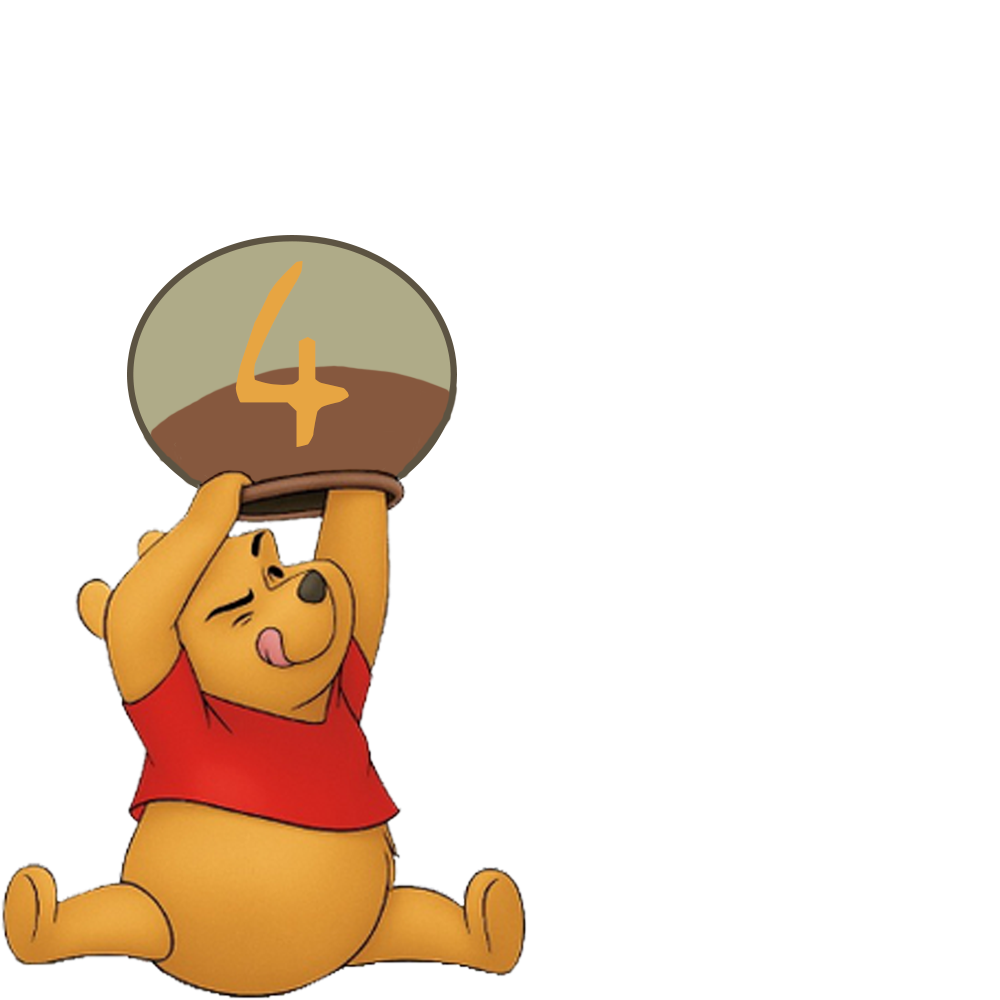
<style>
.page{position:relative;width:1000px;height:1000px;background:#ffffff}
.page>*{position:absolute;margin:0}
.t1{font:202.8px "PeppaPig-Medium";color:#e7a542}
</style>
<div class="page">
<p class="t1" style="left:235px;top:261px;width:114px;height:186px">4</p>
</div>
